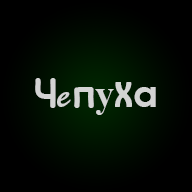
<style>
.page{position:relative;width:192px;height:192px;background:#000000}
.page>*{position:absolute;margin:0}
.t1{font:37.5px "ComicSansMS-Bold";color:#d3d4d3}
.t2{font:37.5px "BrushScriptStd";color:#d3d4d3}
.t3{font:37.5px "TimesNewRomanPS-BoldMT";color:#d3d4d3}
.t4{font:37.5px "HoboStd";color:#d3d4d3}
.t5{font:37.5px "CenturyGothic-Bold";color:#d3d4d3}
</style>
<div class="page">
<p class="t1" style="left:35px;top:78px;width:121px;height:37px">Ч<span class="t2">e</span>п<span class="t3">у</span><span class="t4">x</span><span class="t5">а</span></p>
</div>
